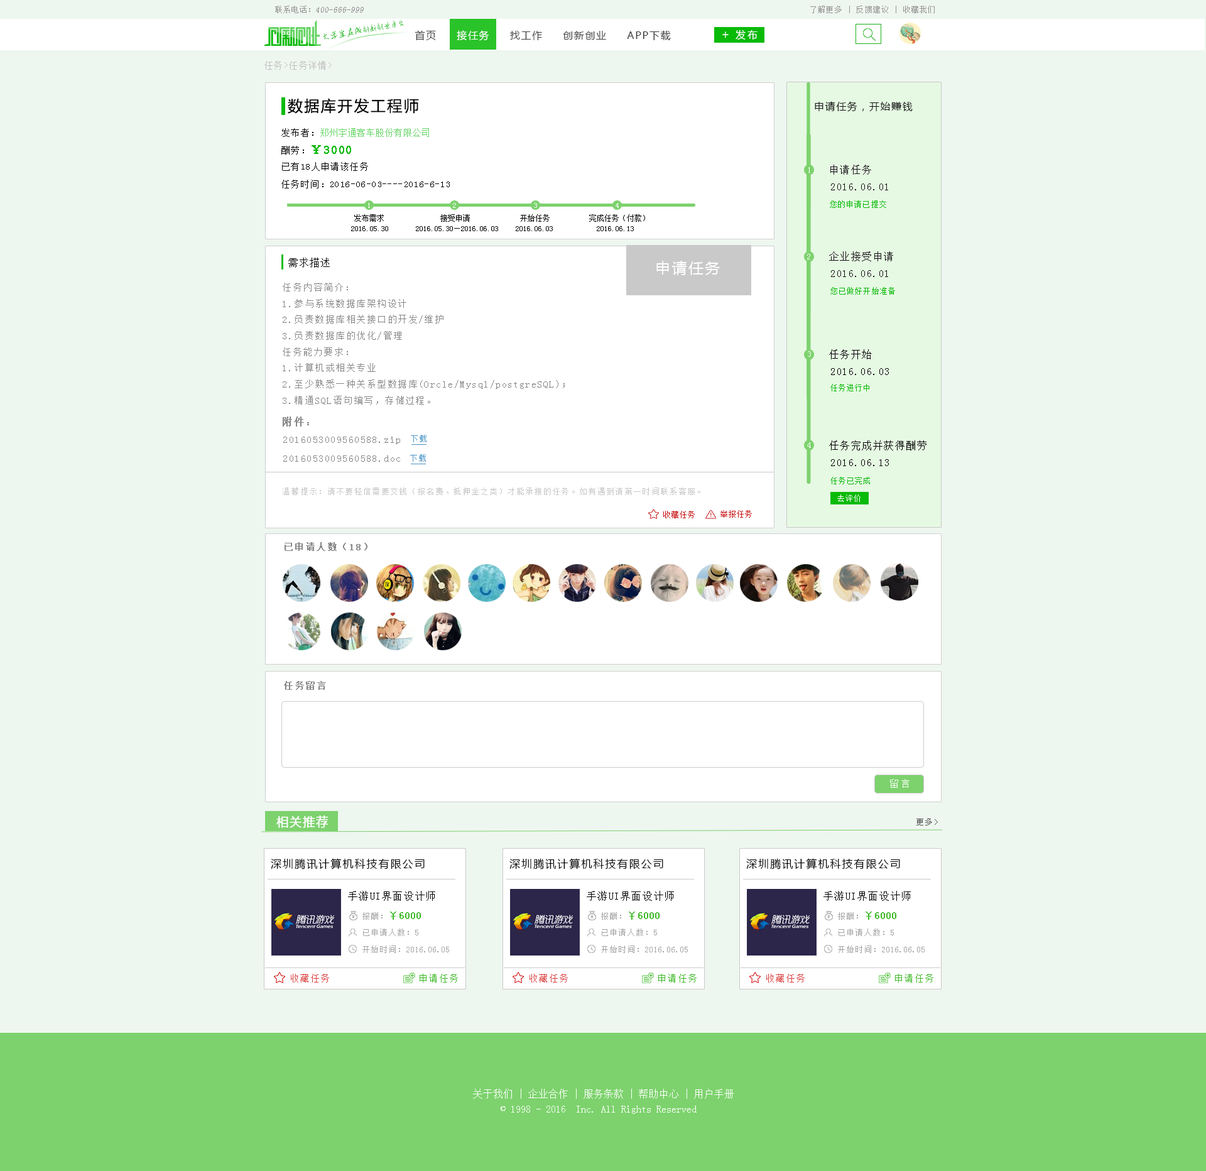
<style>
.page{position:relative;width:1206px;height:1171px;background:#eef6f0}
.page>*{position:absolute;margin:0}
.t1{font:8.4px "SimSun";color:#959595;font-style:italic}
.t2{font:8.4px "SimSun";color:#959595}
.t3{font:7.5px "SimSun";letter-spacing:0.1em;color:#959494}
.t4{font:7.8px "AnJingCheng-Xing-2.0";letter-spacing:-0.01em;color:#09ba08}
.t5{font:8.7px "AnJingCheng-Xing-2.0";letter-spacing:-0.01em;color:#09ba08}
.t6{font:10px "MicrosoftYaHei";letter-spacing:0.2em;color:#ffffff}
.t7{font:10px "MicrosoftYaHei";letter-spacing:0.1em;color:#3e3e3e}
.t8{font:10px "MicrosoftYaHei";letter-spacing:0.1em;color:#ffffff}
.t9{font:11.7px "MicrosoftYaHei";letter-spacing:0.2em;color:#ffffff}
.t10{font:8.8px "SimSun";letter-spacing:0.1em;color:#bebebe}
.t11{font:15.1px "MicrosoftYaHei";letter-spacing:0.1em;color:#000000}
.t12{font:10px "MicrosoftYaHei";letter-spacing:0.1em;color:#151515}
.t13{font:8.8px "SimSun";letter-spacing:0.05em;color:#62d361}
.t14{font:8.8px "SimSun";letter-spacing:0.1em;color:#000000}
.t15{font:11.3px "SimSun";letter-spacing:0.1em;color:#09ba08;font-weight:bold}
.t16{font:8px "SimSun";letter-spacing:0.1em;color:#ffffff;scale:1.05 1}
.t17{font:10px "SimSun";letter-spacing:0.1em;color:#151515}
.t18{font:7.5px "SimSun";letter-spacing:0.1em;color:#ffffff}
.t19{font:7.5px "SimSun";letter-spacing:0.1em;color:#09ba08}
.t20{font:7.5px "SimSun";color:#000000}
.t21{font:10.9px "SimSun";color:#000000}
.t22{font:15.1px "MicrosoftYaHei";letter-spacing:0.1em;color:#ffffff}
.t23{font:9.2px "SimSun";letter-spacing:0.1em;color:#868686}
.t24{font:10px "SimSun";letter-spacing:0.1em;color:#000000}
.t25{font:10px "SimSun";letter-spacing:0.1em;color:#868686;font-weight:bold}
.t26{font:8.4px "SimSun";letter-spacing:0.1em;color:#4a93c6}
.t27{font:8.4px "SimSun";letter-spacing:0.1em;color:#c7c7c7}
.t28{font:8.4px "SimSun";color:#c70d0d}
.t29{font:9.2px "SimSun";letter-spacing:0.1em;color:#868686;font-weight:bold}
.t30{font:9.2px "SimSun";letter-spacing:0.2em;color:#ffffff}
.t31{font:11.7px "MicrosoftYaHei";letter-spacing:0.1em;color:#ffffff;font-weight:bold}
.t32{font:8.4px "SimSun";letter-spacing:0.1em;color:#505050}
.t33{font:10.9px "MicrosoftYaHei";letter-spacing:0.1em;color:#000000}
.t34{font:10px "NSimSun";color:#3cb825;font-weight:bold}
.t35{font:8.4px "NSimSun";color:#a4a4a4}
.t36{font:9.2px "SimSun";letter-spacing:0.1em;color:#db3e3e}
.t37{font:9.2px "SimSun";letter-spacing:0.1em;color:#3cb825}
.t38{font:10px/15.1px "SimSun";color:#ffffff}
</style>
<div class="page">
<p class="t1" style="left:275px;top:6px;width:89px;height:7px"><span class="t2">联系电话：</span>400-666-999</p>
<p class="t3" style="left:810px;top:6px;width:124px;height:7px">了解更多 | 反馈建议 | 收藏我们</p>
<p class="t4" style="left:323px;top:19px;width:81px;height:21px;rotate:-10deg"><span class="t5">大学生在线</span>创新创业平台</p>
<p class="t6" style="left:735px;top:30px;width:22px;height:10px">发布</p>
<p class="t7" style="left:414px;top:30px;width:257px;height:11px">首页     <span class="t8">接任务</span>     找工作     创新创业     APP下载</p>
<p class="t9" style="left:722px;top:31px;width:6px;height:7px">+</p>
<p class="t10" style="left:264px;top:61px;width:68px;height:9px">任务&gt;任务详情&gt;</p>
<p class="t11" style="left:288px;top:98px;width:131px;height:16px">数据库开发工程师</p>
<p class="t12" style="left:814px;top:101px;width:98px;height:11px">申请任务，开始赚钱</p>
<p class="t13" style="left:281px;top:128px;width:148px;height:9px"><span class="t14">发布者：</span>郑州宇通客车股份有限公司</p>
<p class="t15" style="left:281px;top:145px;width:70px;height:9px"><span class="t14">酬劳：</span>￥3000</p>
<p class="t14" style="left:282px;top:162px;width:86px;height:9px">已有18人申请该任务</p>
<p class="t16" style="left:808px;top:167px;width:2px;height:6px">1</p>
<p class="t17" style="left:830px;top:165px;width:41px;height:10px">申请任务</p>
<p class="t14" style="left:281px;top:180px;width:169px;height:8px">任务时间：2016-06-03----2016-6-13</p>
<p class="t17" style="left:831px;top:183px;width:57px;height:7px">2016.06.01</p>
<p class="t18" style="left:368px;top:203px;width:2px;height:5px">1</p>
<p class="t18" style="left:453px;top:203px;width:3px;height:5px">2</p>
<p class="t18" style="left:534px;top:203px;width:3px;height:5px">3</p>
<p class="t18" style="left:615px;top:203px;width:4px;height:5px">4</p>
<p class="t19" style="left:830px;top:200px;width:56px;height:8px">您的申请已提交</p>
<p class="t20" style="left:354px;top:214px;width:30px;height:8px">发布需求</p>
<p class="t20" style="left:440px;top:214px;width:30px;height:8px">接受申请</p>
<p class="t20" style="left:520px;top:214px;width:29px;height:8px">开始任务</p>
<p class="t20" style="left:589px;top:214px;width:56px;height:8px">完成任务（付款）</p>
<p class="t20" style="left:351px;top:226px;width:37px;height:5px">2016.05.30</p>
<p class="t20" style="left:416px;top:226px;width:82px;height:5px">2016.05.30—2016.06.03</p>
<p class="t20" style="left:516px;top:226px;width:37px;height:5px">2016.06.03</p>
<p class="t20" style="left:597px;top:226px;width:37px;height:5px">2016.06.13</p>
<p class="t21" style="left:288px;top:257px;width:42px;height:11px">需求描述</p>
<p class="t16" style="left:807px;top:254px;width:3px;height:5px">2</p>
<p class="t17" style="left:829px;top:251px;width:64px;height:10px">企业接受申请</p>
<p class="t22" style="left:656px;top:261px;width:64px;height:14px">申请任务</p>
<p class="t17" style="left:831px;top:270px;width:57px;height:7px">2016.06.01</p>
<p class="t23" style="left:283px;top:283px;width:282px;height:121px">任务内容简介：<br>1.参与系统数据库架构设计<br>2.负责数据库相关接口的开发/维护<br>3.负责数据库的优化/管理<br>任务能力要求：<br>1.计算机或相关专业<br>2.至少熟悉一种关系型数据库(Orcle/Mysql/postgreSQL)；<br>3.精通SQL语句编写，存储过程。<br><br>附件是有关开发详细资料和协议内容。</p>
<p class="t19" style="left:830px;top:287px;width:65px;height:8px">您已做好开始准备</p>
<p class="t16" style="left:808px;top:351px;width:3px;height:6px">3</p>
<p class="t24" style="left:829px;top:349px;width:42px;height:10px">任务开始</p>
<p class="t24" style="left:831px;top:368px;width:58px;height:7px">2016.06.03</p>
<p class="t19" style="left:830px;top:384px;width:39px;height:7px">任务进行中</p>
<p class="t25" style="left:283px;top:416px;width:26px;height:10px">附件：</p>
<p class="t23" style="left:283px;top:436px;width:117px;height:8px">2016053009560588.zip</p>
<p class="t26" style="left:411px;top:435px;width:15px;height:7px">下载</p>
<p class="t16" style="left:807px;top:442px;width:4px;height:6px">4</p>
<p class="t24" style="left:829px;top:440px;width:97px;height:10px">任务完成并获得酬劳</p>
<p class="t23" style="left:283px;top:455px;width:117px;height:7px">2016053009560588.doc</p>
<p class="t26" style="left:410px;top:454px;width:16px;height:8px">下载</p>
<p class="t24" style="left:831px;top:459px;width:58px;height:7px">2016.06.13</p>
<p class="t19" style="left:830px;top:477px;width:40px;height:7px">任务已完成</p>
<p class="t27" style="left:283px;top:487px;width:417px;height:8px">温馨提示：请不要轻信需要交钱（报名费、抵押金之类）才能承接的任务。如有遇到请第一时间联系客服。</p>
<p class="t18" style="left:837px;top:494px;width:23px;height:8px">去评价</p>
<p class="t28" style="left:720px;top:510px;width:32px;height:7px">举报任务</p>
<p class="t28" style="left:663px;top:511px;width:32px;height:7px">收藏任务</p>
<p class="t29" style="left:284px;top:542px;width:83px;height:9px">已申请人数（18）</p>
<p class="t29" style="left:284px;top:681px;width:42px;height:8px">任务留言</p>
<p class="t30" style="left:890px;top:779px;width:19px;height:8px">留言</p>
<p class="t31" style="left:276px;top:815px;width:52px;height:13px">相关推荐</p>
<p class="t32" style="left:916px;top:818px;width:22px;height:7px">更多&gt;</p>
<p class="t33" style="left:271px;top:858px;width:153px;height:11px">深圳腾讯计算机科技有限公司</p>
<p class="t33" style="left:509px;top:858px;width:154px;height:11px">深圳腾讯计算机科技有限公司</p>
<p class="t33" style="left:746px;top:858px;width:154px;height:11px">深圳腾讯计算机科技有限公司</p>
<p class="t24" style="left:348px;top:890px;width:87px;height:10px">手游UI界面设计师</p>
<p class="t24" style="left:587px;top:890px;width:87px;height:10px">手游UI界面设计师</p>
<p class="t24" style="left:823px;top:890px;width:88px;height:10px">手游UI界面设计师</p>
<p class="t34" style="left:362px;top:911px;width:59px;height:8px"><span class="t35">报酬：</span>￥6000</p>
<p class="t34" style="left:601px;top:911px;width:58px;height:8px"><span class="t35">报酬：</span>￥6000</p>
<p class="t34" style="left:838px;top:911px;width:58px;height:8px"><span class="t35">报酬：</span>￥6000</p>
<p class="t35" style="left:363px;top:928px;width:55px;height:8px">已申请人数：5</p>
<p class="t35" style="left:602px;top:928px;width:55px;height:8px">已申请人数：5</p>
<p class="t35" style="left:838px;top:928px;width:56px;height:8px">已申请人数：5</p>
<p class="t35" style="left:362px;top:945px;width:87px;height:8px">开始时间：2016.06.05</p>
<p class="t35" style="left:601px;top:945px;width:87px;height:8px">开始时间：2016.06.05</p>
<p class="t35" style="left:838px;top:945px;width:86px;height:8px">开始时间：2016.06.05</p>
<p class="t36" style="left:291px;top:973px;width:38px;height:9px">收藏任务</p>
<p class="t37" style="left:419px;top:973px;width:39px;height:9px">申请任务</p>
<p class="t36" style="left:529px;top:973px;width:39px;height:9px">收藏任务</p>
<p class="t37" style="left:658px;top:973px;width:38px;height:9px">申请任务</p>
<p class="t36" style="left:766px;top:973px;width:38px;height:9px">收藏任务</p>
<p class="t37" style="left:895px;top:973px;width:38px;height:9px">申请任务</p>
<p class="t38" style="left:473px;top:1088px;width:260px;height:25px;text-align:center">关于我们 | 企业合作 | 服务条款 | 帮助中心 | 用户手册<br>© 1998 - 2016  Inc. All Rights Reserved</p>
</div>
